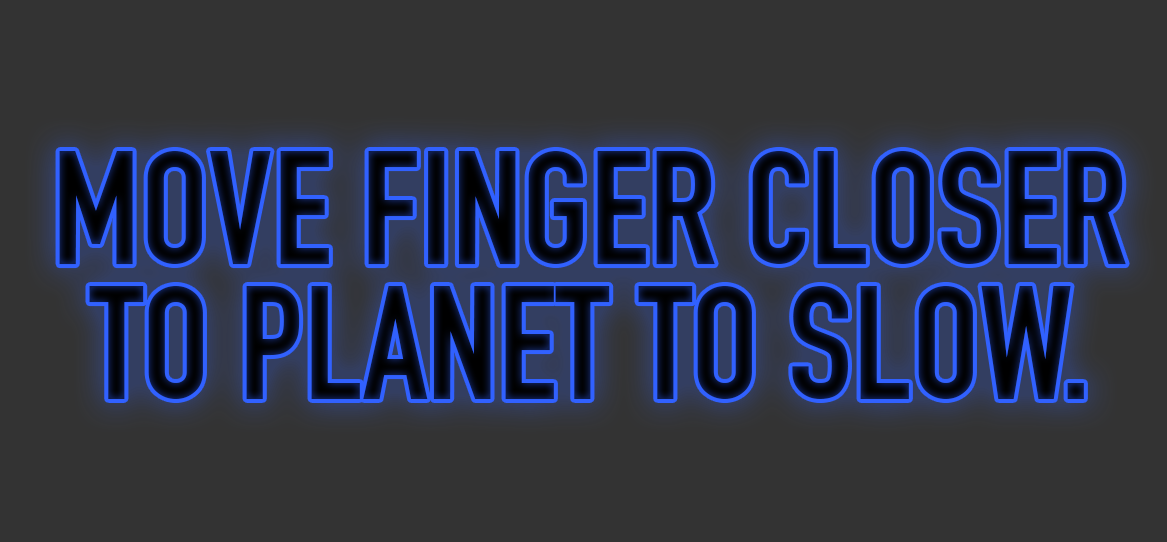
<style>
.page{position:relative;width:1167px;height:542px;background:#333333}
.page>*{position:absolute;margin:0}
.t1{font:158.7px/135.5px "DINEngschrift";color:#050918;text-transform:uppercase}
</style>
<div class="page">
<p class="t1" style="left:59px;top:151px;width:1067px;height:248px;text-align:center">move finger closer <br>to planet to slow.</p>
</div>
